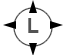
<style>
.page{position:relative;width:65px;height:55px;background:#ffffff}
.page>*{position:absolute;margin:0}
.t1{font:20px "Arial-BoldMT";color:#535353}
</style>
<div class="page">
<p class="t1" style="left:28px;top:18px;width:11px;height:15px">L</p>
</div>
